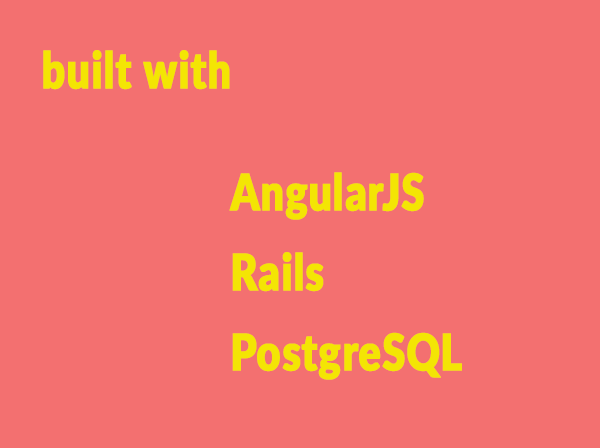
<style>
.page{position:relative;width:600px;height:448px;background:#f37070}
.page>*{position:absolute;margin:0}
.t1{font:50.4px "Lato-Black";letter-spacing:0.01em;color:#f3e504;font-weight:bold;scale:0.81 1}
.t2{font:50.4px/16px "Lato-Black";letter-spacing:0.01em;color:#f3e504;font-weight:bold;scale:0.81 1}
</style>
<div class="page">
<p class="t1" style="left:43px;top:50px;width:187px;height:40px">built with</p>
<p class="t2" style="left:229px;top:172px;width:233px;height:208px">AngularJS<br><br><br><br><br>Rails<br><br><br><br><br>PostgreSQL</p>
</div>
